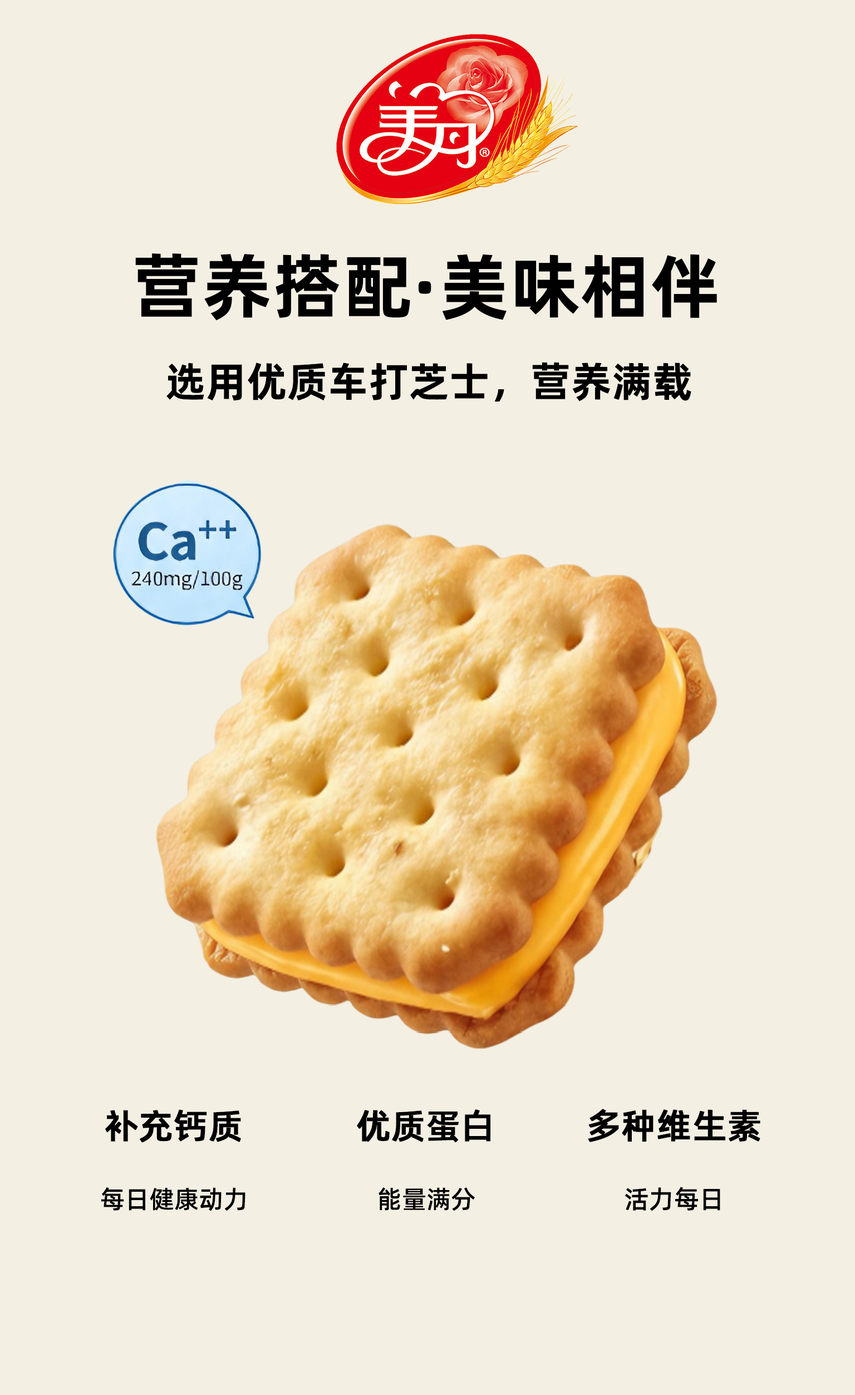
<style>
.page{position:relative;width:855px;height:1395px;background:#f3efe3}
.page>*{position:absolute;margin:0}
.t1{font:71.4px "AlibabaPuHuiTi-Bold";color:#000000}
.t2{font:41.3px "AlibabaPuHuiTi-Bold";color:#000000}
.t3{font:34.3px "AlibabaPuHuiTi-Medium";color:#000000;font-weight:bold}
.t4{font:34.8px "AlibabaPuHuiTi-Medium";color:#000000;font-weight:bold}
.t5{font:25px "AlibabaPuHuiTi-Medium";color:#000000}
.t6{font:25.5px "AlibabaPuHuiTi-Medium";color:#000000}
</style>
<div class="page">
<p class="t1" style="left:135px;top:253px;width:582px;height:68px">营养搭配·美味相伴</p>
<p class="t2" style="left:166px;top:362px;width:525px;height:39px">选用优质车打芝士，营养满载</p>
<p class="t3" style="left:105px;top:1109px;width:136px;height:33px">补充钙质</p>
<p class="t3" style="left:357px;top:1109px;width:133px;height:33px">优质蛋白</p>
<p class="t4" style="left:588px;top:1108px;width:172px;height:34px">多种维生素</p>
<p class="t5" style="left:101px;top:1187px;width:145px;height:24px">每日健康动力</p>
<p class="t5" style="left:379px;top:1187px;width:96px;height:24px">能量满分</p>
<p class="t6" style="left:625px;top:1186px;width:95px;height:25px">活力每日</p>
</div>
